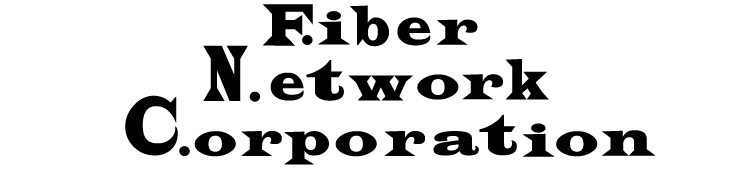
<style>
.page{position:relative;width:739px;height:170px;background:#ffffff}
.page>*{position:absolute;margin:0}
.t1{font:61.8px "LatinWide";color:#000000;scale:0.62 1}
.t2{font:55.9px "LatinWide";color:#000000;scale:0.68 1}
.t3{font:47.4px "LatinWide";color:#000000}
.t4{font:53.3px "LatinWide";color:#000000;scale:0.74 1}
.t5{font:51.9px "LatinWide";color:#000000;scale:0.84 1}
.t6{font:51.4px "LatinWide";color:#000000;scale:0.67 1}
.t7{font:82.7px "LatinWide";color:#000000;scale:0.37 1}
.t8{font:57.7px "LatinWide";color:#000000}
.t9{font:57.7px "LatinWide";color:#000000;scale:0.6 1}
.t10{font:51.5px "LatinWide";color:#000000;scale:0.74 1}
.t11{font:35px "LatinWide";color:#000000}
.t12{font:82.2px "LatinWide";color:#000000;scale:0.52 1}
.t13{font:47.4px "LatinWide";color:#000000;scale:0.9 1}
.t14{font:47.3px "LatinWide";color:#000000}
.t15{font:51.5px "LatinWide";color:#000000;scale:0.87 1}
</style>
<div class="page">
<p class="t1" style="left:262px;top:4px;width:51px;height:42px">F</p>
<p class="t2" style="left:350px;top:5px;width:39px;height:42px">b</p>
<p class="t3" style="left:318px;top:11px;width:32px;height:34px">i</p>
<p class="t4" style="left:397px;top:17px;width:34px;height:29px">e</p>
<p class="t5" style="left:437px;top:19px;width:41px;height:26px">r</p>
<p class="t6" style="left:302px;top:35px;width:11px;height:10px">.</p>
<p class="t7" style="left:203px;top:45px;width:45px;height:56px">N</p>
<p class="t8" style="left:306px;top:60px;width:38px;height:41px">t</p>
<p class="t9" style="left:505px;top:59px;width:44px;height:41px">k</p>
<p class="t4" style="left:270px;top:72px;width:34px;height:29px">e</p>
<p class="t10" style="left:348px;top:75px;width:65px;height:26px">w</p>
<p class="t11" style="left:417px;top:74px;width:42px;height:26px">0</p>
<p class="t5" style="left:462px;top:74px;width:41px;height:26px">r</p>
<p class="t12" style="left:125px;top:95px;width:53px;height:61px">C</p>
<p class="t6" style="left:249px;top:91px;width:12px;height:11px">.</p>
<p class="t8" style="left:479px;top:114px;width:38px;height:42px">t</p>
<p class="t3" style="left:522px;top:123px;width:33px;height:34px">i</p>
<p class="t11" style="left:194px;top:131px;width:42px;height:26px">0</p>
<p class="t5" style="left:241px;top:131px;width:41px;height:25px">r</p>
<p class="t13" style="left:284px;top:131px;width:45px;height:34px">p</p>
<p class="t11" style="left:335px;top:131px;width:42px;height:26px">0</p>
<p class="t5" style="left:384px;top:131px;width:41px;height:25px">r</p>
<p class="t14" style="left:433px;top:131px;width:46px;height:25px">a</p>
<p class="t11" style="left:556px;top:131px;width:42px;height:26px">0</p>
<p class="t15" style="left:602px;top:130px;width:54px;height:26px">n</p>
<p class="t6" style="left:179px;top:146px;width:11px;height:10px">.</p>
</div>
